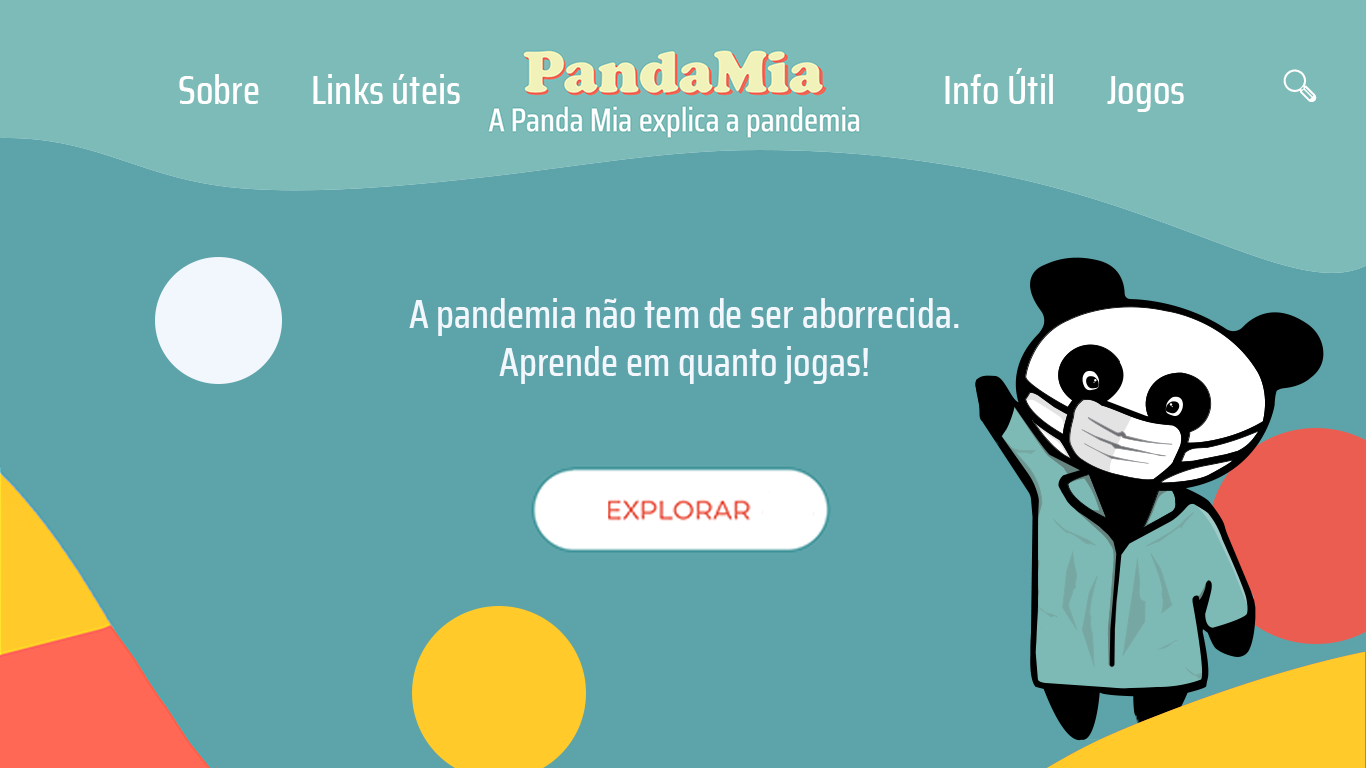
<style>
.page{position:relative;width:1366px;height:768px;background:#5ca4a9}
.page>*{position:absolute;margin:0}
.t1{font:40px "SairaCondensed-Medium";color:#ffffff}
.t2{font:40px "SairaCondensed-Medium";color:#f2f7fd}
</style>
<div class="page">
<p class="t1" style="left:179px;top:74px;width:80px;height:30px">Sobre</p>
<p class="t1" style="left:313px;top:74px;width:147px;height:30px">Links úteis</p>
<p class="t1" style="left:945px;top:68px;width:108px;height:36px">Info Útil</p>
<p class="t1" style="left:1107px;top:76px;width:77px;height:36px">Jogos</p>
<p class="t2" style="left:409px;top:298px;width:550px;height:86px;text-align:center">A pandemia não tem de ser aborrecida.<br>Aprende em quanto jogas!</p>
</div>
